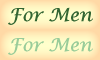
<style>
.page{position:relative;width:100px;height:60px}
.page>*{position:absolute;margin:0}
.t1{font:18px "LucidaCalligraphy-Italic";color:#336633}
.t2{font:18px "LucidaCalligraphy-Italic";color:#99cc99}
</style>
<div class="page">
<p class="t1" style="left:8px;top:7px;width:85px;height:18px">For Men</p>
<p class="t2" style="left:8px;top:37px;width:85px;height:18px">For Men</p>
</div>
